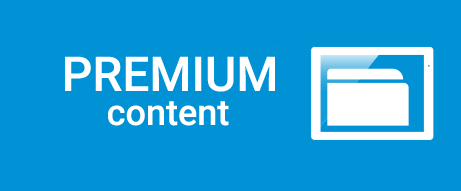
<style>
.page{position:relative;width:461px;height:191px;background:#0092d5}
.page>*{position:absolute;margin:0}
.t1{font:48px "Roboto-Medium";color:#ffffff}
.t2{font:36px "Roboto-Medium";color:#ffffff}
</style>
<div class="page">
<p class="t1" style="left:65px;top:56px;width:210px;height:36px">PREMIUM</p>
<p class="t2" style="left:108px;top:101px;width:121px;height:25px">content</p>
</div>
